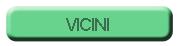
<style>
.page{position:relative;width:180px;height:46px;background:#67d38d}
.page>*{position:absolute;margin:0}
.t1{font:18px "ArialMT";letter-spacing:-0.06em;color:#3c6f4e}
</style>
<div class="page">
<p class="t1" style="left:66px;top:18px;width:43px;height:13px">VICINI</p>
</div>
